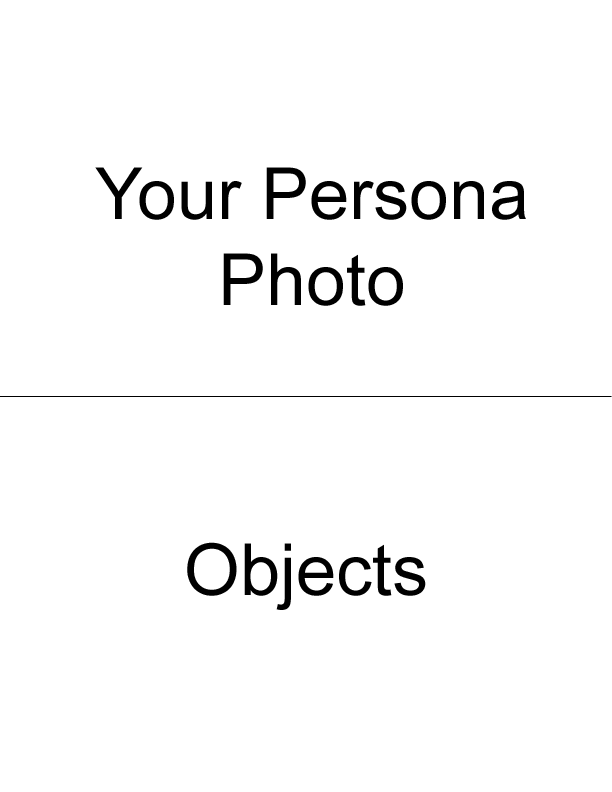
<style>
.page{position:relative;width:612px;height:792px;background:#ffffff}
.page>*{position:absolute;margin:0}
.t1{font:72px/86px "ArialMT";color:#000000}
.t2{font:72px "ArialMT";color:#000000}
</style>
<div class="page">
<p class="t1" style="left:95px;top:167px;width:431px;height:139px;text-align:center">Your Persona<br>Photo</p>
<p class="t2" style="left:187px;top:542px;width:239px;height:68px">Objects</p>
</div>
